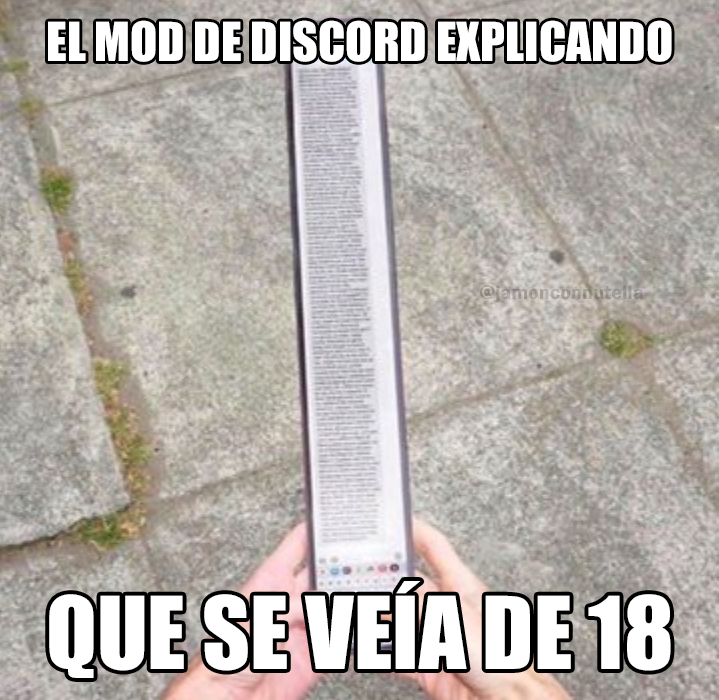
<style>
.page{position:relative;width:719px;height:700px}
.page>*{position:absolute;margin:0}
.t1{font:49.8px "Impact";color:#ffffff}
.t2{font:20.2px "FranklinGothic-Demi";color:#9f9a95}
.t3{font:92.7px "Impact";color:#ffffff}
</style>
<div class="page">
<p class="t1" style="left:48px;top:20px;width:624px;height:42px">EL MOD DE DISCORD EXPLICANDO</p>
<p class="t2" style="left:480px;top:285px;width:163px;height:18px">@jamonconnutella</p>
<p class="t3" style="left:49px;top:581px;width:622px;height:97px">QUE SE VEÍA DE 18</p>
</div>
